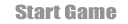
<style>
.page{position:relative;width:128px;height:24px;background:#ffffff}
.page>*{position:absolute;margin:0}
.t1{font:18px "Impact";color:#959494;scale:1.25 1}
</style>
<div class="page">
<p class="t1" style="left:15px;top:4px;width:102px;height:16px">Start Game</p>
</div>
